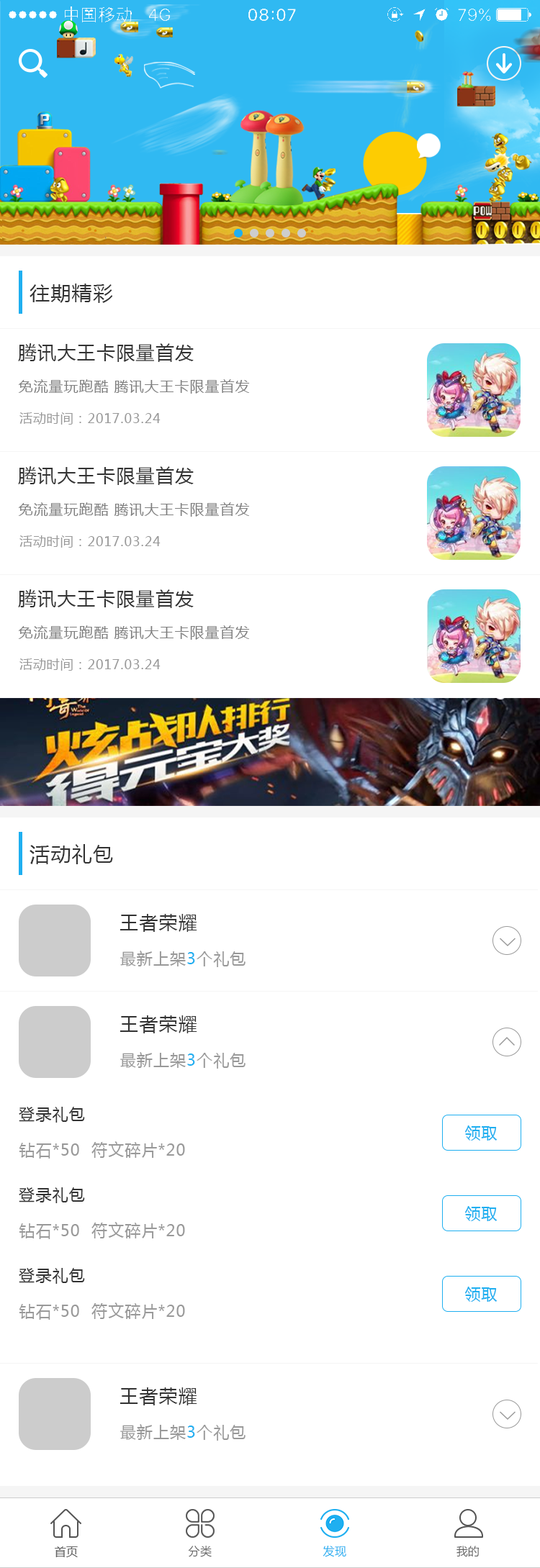
<style>
.page{position:relative;width:540px;height:1568px;background:#ffffff}
.page>*{position:absolute;margin:0}
.t1{font:20.1px "MicrosoftYaHei";letter-spacing:0.05em;color:#333333}
.t2{font:18.7px "MicrosoftYaHei";letter-spacing:0.05em;color:#333333}
.t3{font:14.4px "MicrosoftYaHei";letter-spacing:0.05em;color:#808080}
.t4{font:13px "MicrosoftYaHei";letter-spacing:0.05em;color:#999999}
.t5{font:15.8px "MicrosoftYaHei";letter-spacing:0.05em;color:#999999}
.t6{font:15.8px "MicrosoftYaHei";letter-spacing:0.05em;color:#1faff0}
.t7{font:15.8px "MicrosoftYaHei";letter-spacing:0.05em;color:#333333}
.t8{font:11.5px "MicrosoftYaHei";letter-spacing:0.025em;color:#666666}
.t9{font:11.5px "MicrosoftYaHei";letter-spacing:0.02em;color:#666666}
.t10{font:11.5px "MicrosoftYaHei";letter-spacing:0.02em;color:#1faff0}
.t11{font:11.3px "MicrosoftYaHei";letter-spacing:0.02em;color:#666666}
</style>
<div class="page">
<p class="t1" style="left:30px;top:284px;width:83px;height:19px">往期精彩</p>
<p class="t2" style="left:18px;top:343px;width:176px;height:19px">腾讯大王卡限量首发</p>
<p class="t3" style="left:18px;top:379px;width:232px;height:15px">免流量玩跑酷 腾讯大王卡限量首发</p>
<p class="t4" style="left:19px;top:412px;width:141px;height:13px">活动时间：2017.03.24</p>
<p class="t2" style="left:18px;top:466px;width:176px;height:19px">腾讯大王卡限量首发</p>
<p class="t3" style="left:18px;top:502px;width:232px;height:15px">免流量玩跑酷 腾讯大王卡限量首发</p>
<p class="t4" style="left:19px;top:535px;width:141px;height:13px">活动时间：2017.03.24</p>
<p class="t2" style="left:18px;top:589px;width:176px;height:19px">腾讯大王卡限量首发</p>
<p class="t3" style="left:18px;top:625px;width:232px;height:15px">免流量玩跑酷 腾讯大王卡限量首发</p>
<p class="t4" style="left:19px;top:658px;width:141px;height:13px">活动时间：2017.03.24</p>
<p class="t1" style="left:30px;top:844px;width:83px;height:20px">活动礼包</p>
<p class="t2" style="left:119px;top:914px;width:78px;height:18px">王者荣耀</p>
<p class="t5" style="left:120px;top:951px;width:125px;height:16px">最新上架<span class="t6">3</span>个礼包</p>
<p class="t2" style="left:119px;top:1015px;width:78px;height:18px">王者荣耀</p>
<p class="t5" style="left:120px;top:1052px;width:125px;height:17px">最新上架<span class="t6">3</span>个礼包</p>
<p class="t7" style="left:19px;top:1107px;width:66px;height:16px">登录礼包</p>
<p class="t6" style="left:464px;top:1125px;width:33px;height:16px">领取</p>
<p class="t5" style="left:19px;top:1141px;width:166px;height:18px">钻石*50  符文碎片*20</p>
<p class="t7" style="left:19px;top:1187px;width:66px;height:16px">登录礼包</p>
<p class="t6" style="left:464px;top:1206px;width:33px;height:15px">领取</p>
<p class="t5" style="left:19px;top:1222px;width:166px;height:17px">钻石*50  符文碎片*20</p>
<p class="t7" style="left:19px;top:1268px;width:66px;height:16px">登录礼包</p>
<p class="t6" style="left:464px;top:1287px;width:33px;height:15px">领取</p>
<p class="t5" style="left:19px;top:1302px;width:166px;height:18px">钻石*50  符文碎片*20</p>
<p class="t2" style="left:119px;top:1387px;width:78px;height:18px">王者荣耀</p>
<p class="t5" style="left:120px;top:1424px;width:125px;height:17px">最新上架<span class="t6">3</span>个礼包</p>
<p class="t8" style="left:55px;top:1546px;width:23px;height:11px">首页</p>
<p class="t9" style="left:188px;top:1546px;width:24px;height:11px">分类</p>
<p class="t10" style="left:322px;top:1546px;width:24px;height:11px">发现</p>
<p class="t11" style="left:456px;top:1546px;width:23px;height:11px">我的</p>
</div>
